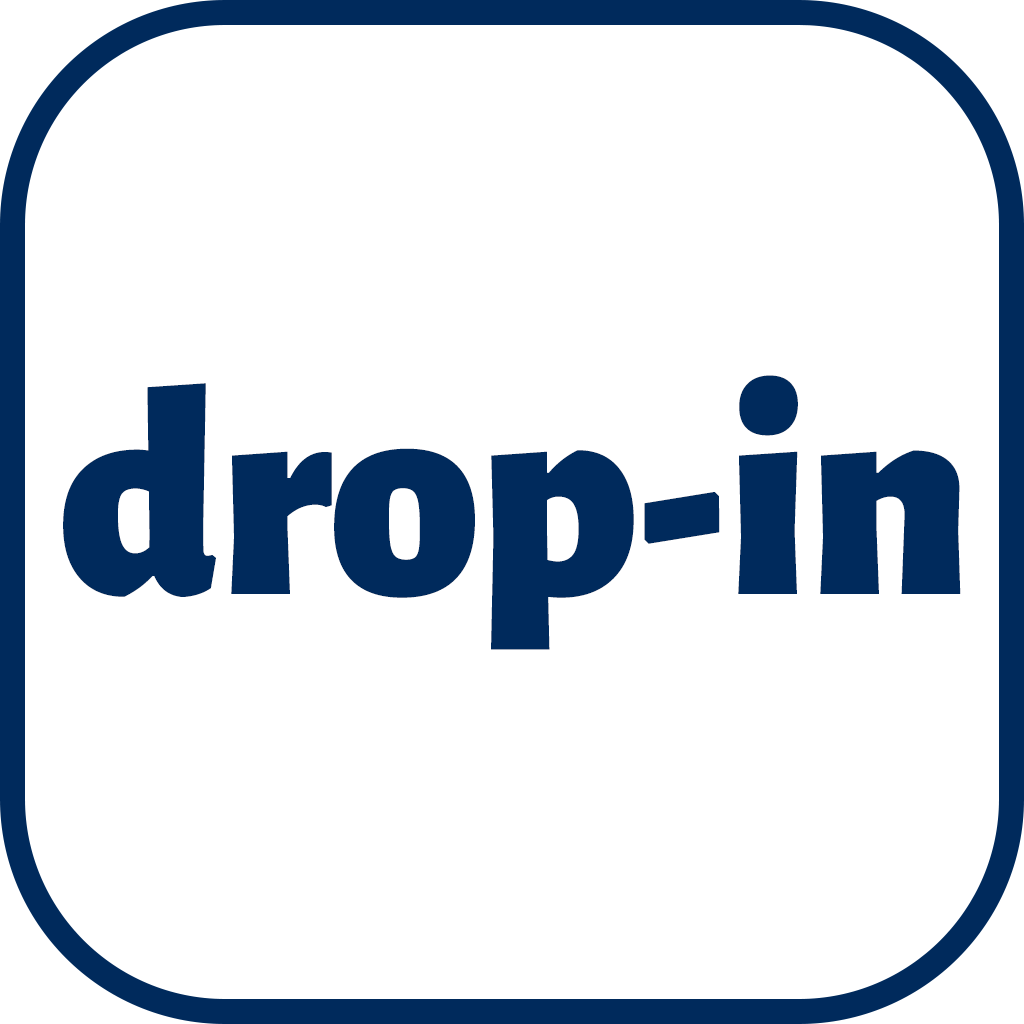
<style>
.page{position:relative;width:1024px;height:1024px;background:#ffffff}
.page>*{position:absolute;margin:0}
.t1{font:300px "AlegreyaSans-Black";color:#002a5c}
</style>
<div class="page">
<p class="t1" style="left:63px;top:375px;width:898px;height:275px">drop-in</p>
</div>
